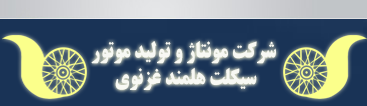
<style>
.page{position:relative;width:367px;height:106px;background:#193356}
.page>*{position:absolute;margin:0}
.t1{font:22.3px "BTitrBold";color:#f7f8f3;scale:0.89 1}
</style>
<div class="page">
<p class="t1" style="left:91px;top:41px;width:185px;height:49px;text-align:center">شرکت مونتاژ و تولید موتور<br> سیکلت هلمند غزنوی</p>
</div>
